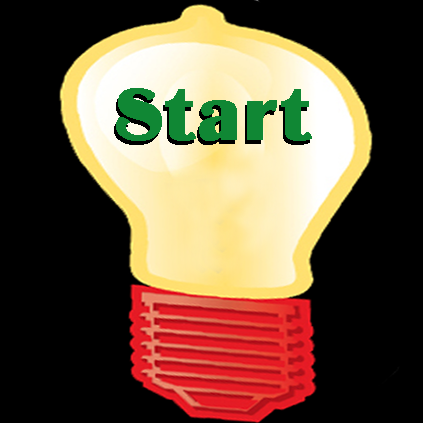
<style>
.page{position:relative;width:423px;height:423px;background:#000000}
.page>*{position:absolute;margin:0}
.t1{font:75px "BinnerD";letter-spacing:0.02em;color:#108734;font-weight:bold}
</style>
<div class="page">
<p class="t1" style="left:116px;top:88px;width:196px;height:53px">Start</p>
<p class="t1" style="left:114px;top:92px;width:196px;height:53px">Start</p>
</div>
